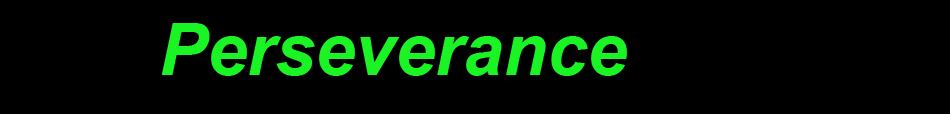
<style>
.page{position:relative;width:950px;height:114px;background:#000000}
.page>*{position:absolute;margin:0}
.t1{font:72px "Arial-BoldItalicMT";color:#1af324}
</style>
<div class="page">
<p class="t1" style="left:161px;top:23px;width:466px;height:53px">Perseverance</p>
</div>
